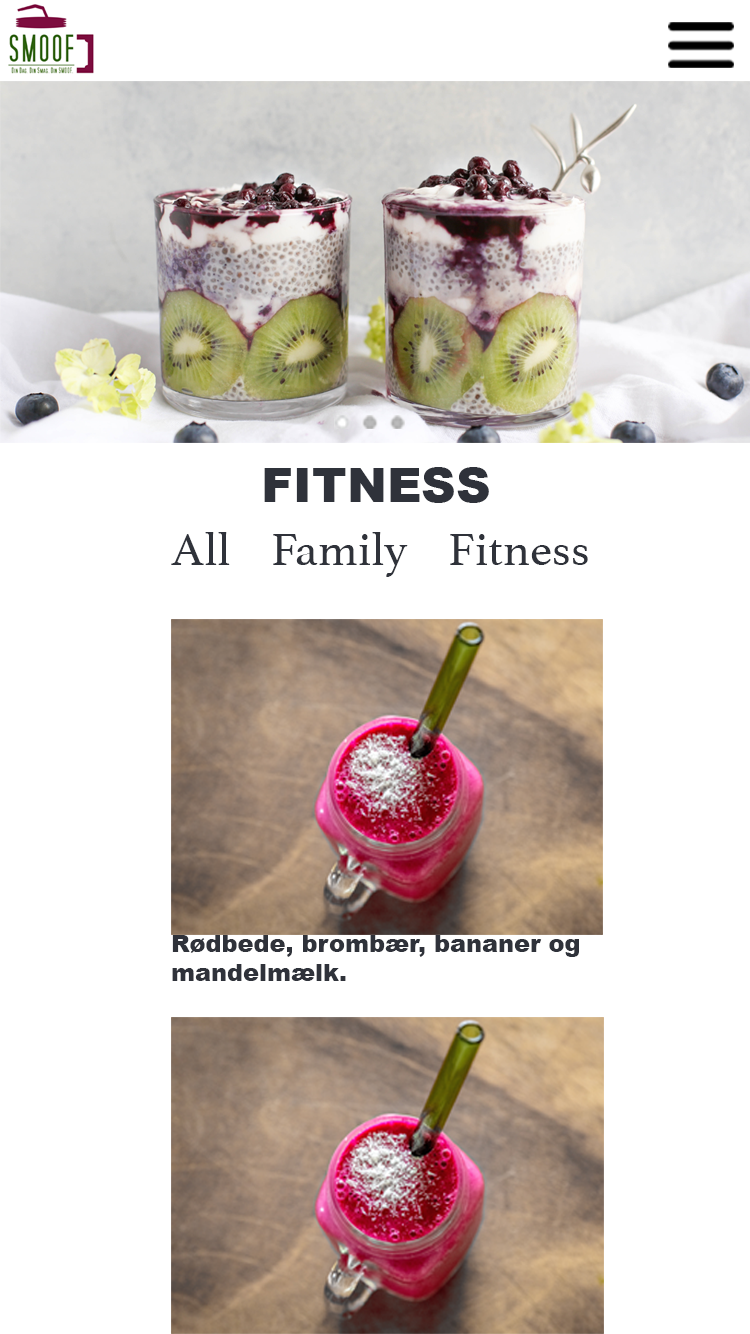
<style>
.page{position:relative;width:750px;height:1334px;background:#ffffff}
.page>*{position:absolute;margin:0}
.t1{font:48px "Arial-Black";color:#2f323a}
.t2{font:48px "Athelas-Regular";color:#2f323a}
.t3{font:24px "Arial-Black";color:#2f323a}
</style>
<div class="page">
<p class="t1" style="left:264px;top:467px;width:225px;height:36px">FITNESS</p>
<p class="t2" style="left:171px;top:532px;width:417px;height:45px">All    Family    Fitness</p>
<p class="t3" style="left:172px;top:935px;width:407px;height:46px">Rødbede, brombær, bananer og mandelmælk.</p>
</div>
